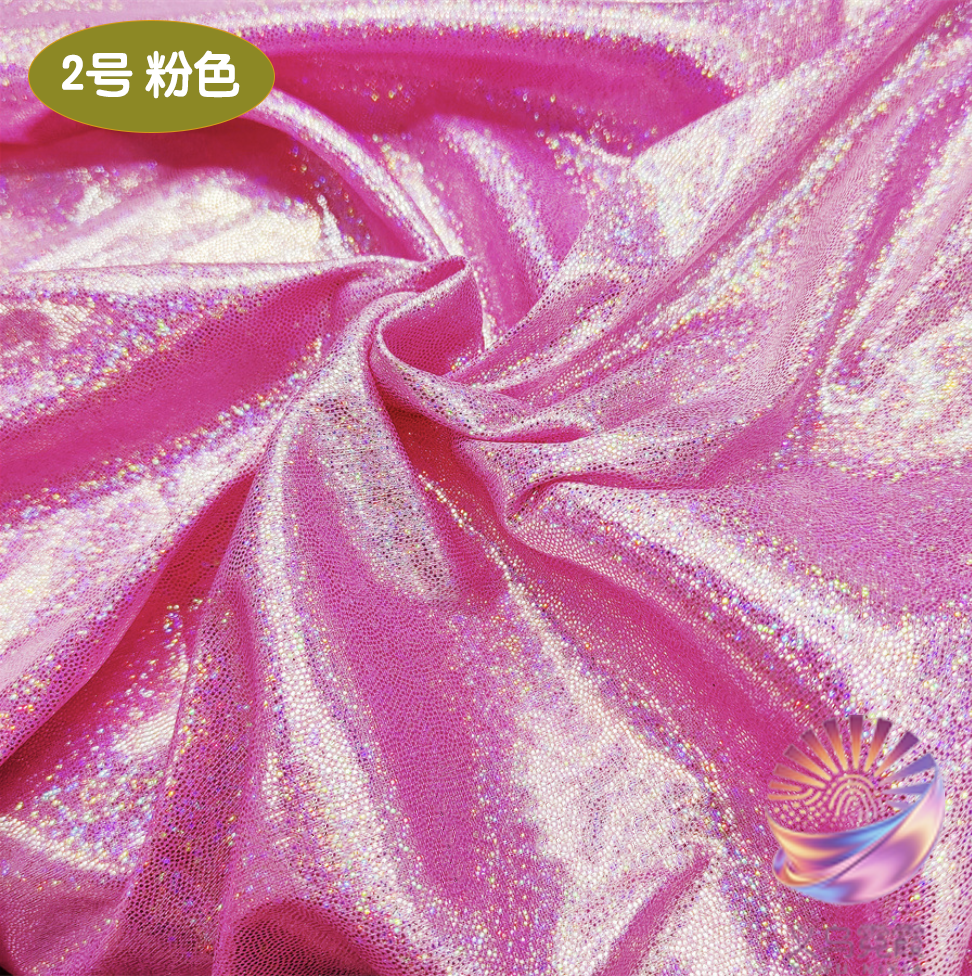
<style>
.page{position:relative;width:972px;height:976px}
.page>*{position:absolute;margin:0}
.t1{font:49.1px "STYuanti-SC-Bold";color:#ffffff;scale:0.97 1}
.t2{font:84.6px "STBaoliSC-Regular";color:#ffffff;scale:0.97 1}
</style>
<div class="page">
<p class="t1" style="left:62px;top:50px;width:178px;height:49px"><span class="t2">         </span>2号 粉色</p>
</div>
